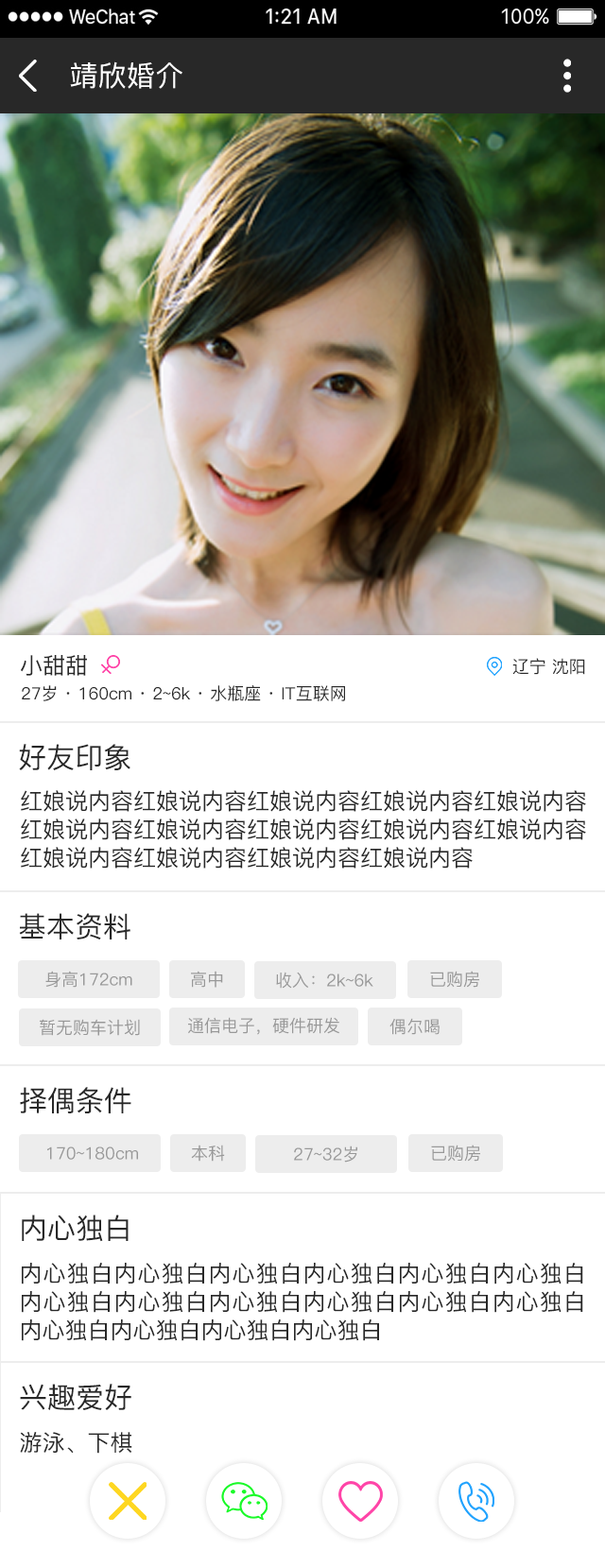
<style>
.page{position:relative;width:605px;height:1568px;background:#ffffff}
.page>*{position:absolute;margin:0}
.t1{font:28.4px "PingFang-SC-Medium";letter-spacing:0.01em;color:#ffffff;text-transform:uppercase}
.t2{font:22.7px "PingFang-SC-Medium";color:#282828;text-transform:uppercase}
.t3{font:17px "PingFang-SC-Medium";color:#282828;text-transform:uppercase}
.t4{font:17px "PingFang-SC-Medium";color:#282828}
.t5{font:28.4px "PingFang-SC-Medium";color:#282828;text-transform:uppercase}
.t6{font:22.7px/28.4px "PingFang-SC-Medium";color:#282828;text-transform:uppercase}
.t7{font:17px "PingFang-SC-Medium";color:#989898;text-transform:uppercase}
.t8{font:17px "PingFang-SC-Medium";color:#989898}
</style>
<div class="page">
<p class="t1" style="left:70px;top:61px;width:112px;height:28px">靖欣婚介</p>
<p class="t2" style="left:21px;top:655px;width:66px;height:21px">小甜甜</p>
<p class="t3" style="left:512px;top:658px;width:73px;height:17px">辽宁 沈阳</p>
<p class="t4" style="left:22px;top:685px;width:323px;height:16px"><span class="t3">27岁 · 160</span>cm · 2~6k · 水瓶座 · IT互联网</p>
<p class="t5" style="left:19px;top:744px;width:111px;height:26px">好友印象</p>
<p class="t6" style="left:21px;top:790px;width:565px;height:79px">红娘说内容红娘说内容红娘说内容红娘说内容红娘说内容<br>红娘说内容红娘说内容红娘说内容红娘说内容红娘说内容<br>红娘说内容红娘说内容红娘说内容红娘说内容</p>
<p class="t5" style="left:19px;top:913px;width:111px;height:26px">基本资料</p>
<p class="t7" style="left:45px;top:971px;width:87px;height:17px">身高172<span class="t8">cm</span></p>
<p class="t7" style="left:191px;top:971px;width:32px;height:17px">高中</p>
<p class="t8" style="left:276px;top:972px;width:97px;height:17px">收入：2k~6k</p>
<p class="t8" style="left:430px;top:971px;width:49px;height:17px">已购房</p>
<p class="t7" style="left:40px;top:1019px;width:100px;height:17px">暂无购车计划</p>
<p class="t7" style="left:188px;top:1017px;width:151px;height:18px">通信电子，硬件研发</p>
<p class="t8" style="left:389px;top:1018px;width:50px;height:17px">偶尔喝</p>
<p class="t5" style="left:20px;top:1087px;width:111px;height:26px">择偶条件</p>
<p class="t7" style="left:191px;top:1145px;width:34px;height:17px">本科</p>
<p class="t8" style="left:294px;top:1146px;width:63px;height:17px">27~32岁</p>
<p class="t8" style="left:431px;top:1145px;width:49px;height:17px">已购房</p>
<p class="t7" style="left:47px;top:1146px;width:91px;height:14px">170~180<span class="t8">cm</span></p>
<p class="t5" style="left:22px;top:1215px;width:107px;height:27px">内心独白</p>
<p class="t6" style="left:22px;top:1263px;width:561px;height:78px;text-align:justify">内心独白内心独白内心独白内心独白内心独白内心独白内心独白内心独白内心独白内心独白内心独白内心独白内心独白内心独白内心独白内心独白</p>
<p class="t5" style="left:20px;top:1384px;width:111px;height:26px">兴趣爱好</p>
<p class="t2" style="left:20px;top:1432px;width:112px;height:22px">游泳、下棋</p>
</div>
